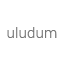
<style>
.page{position:relative;width:64px;height:64px;background:#ffffff}
.page>*{position:absolute;margin:0}
.t1{font:15.4px "Roboto-Light";color:#777777}
</style>
<div class="page">
<p class="t1" style="left:7px;top:27px;width:50px;height:11px">uludum</p>
</div>
